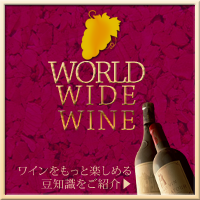
<style>
.page{position:relative;width:200px;height:200px}
.page>*{position:absolute;margin:0}
.t1{font:33px/25px "ChaparralPro-Regular";letter-spacing:-0.1em}
.t2{font:30px/25px "ChaparralPro-Regular";letter-spacing:0.05em}
.t3{font:30px/22px "ChaparralPro-Regular";letter-spacing:0.05em}
.t4{font:11px/13px "KozMinPr6N-Regular";letter-spacing:0.05em;color:#ebd0a7}
</style>
<div class="page">
<p class="t1" style="left:48px;top:61px;width:98px;height:70px;text-align:center">WORLD<br>   <span class="t2">WIDE</span><span class="t3"> <br>WINE</span></p>
<p class="t4" style="left:18px;top:165px;width:113px;height:24px;text-align:right">ワインをもっと楽しめる<br>豆知識をご紹介▶</p>
</div>
